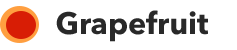
<style>
.page{position:relative;width:237px;height:50px;background:#ffffff}
.page>*{position:absolute;margin:0}
.t1{font:30.6px "AvenirNext-Bold";color:#292929}
</style>
<div class="page">
<p class="t1" style="left:56px;top:10px;width:152px;height:32px">Grapefruit</p>
</div>
